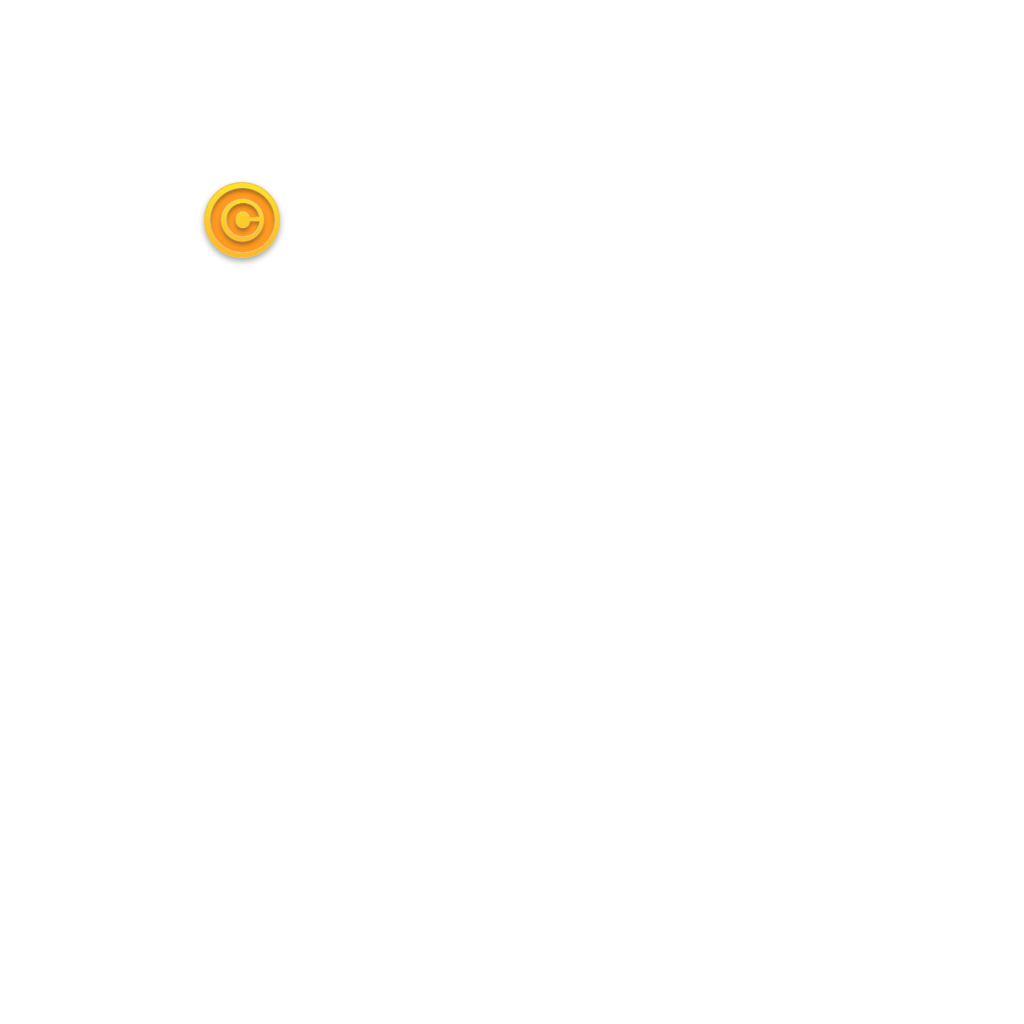
<style>
.page{position:relative;width:1024px;height:1024px;background:#ffffff}
.page>*{position:absolute;margin:0}
.t1{font:48px "Bauhaus93"}
</style>
<div class="page">
<p class="t1" style="left:226px;top:203px;width:34px;height:34px">C</p>
</div>
